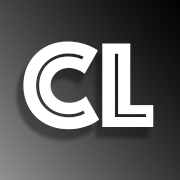
<style>
.page{position:relative;width:180px;height:180px}
.page>*{position:absolute;margin:0}
.t1{font:125px "Phosphate-Inline";color:#ffffff}
</style>
<div class="page">
<p class="t1" style="left:23px;top:41px;width:131px;height:89px">CL</p>
</div>
